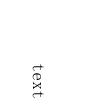
<style>
.page{position:relative;width:100px;height:100px;background:#ffffff}
.page>*{position:absolute;margin:0}
.t1{font:18px "SimSun";color:#000000}
</style>
<div class="page">
<p class="t1" style="left:32px;top:64px;width:12px;height:34px">text</p>
</div>
